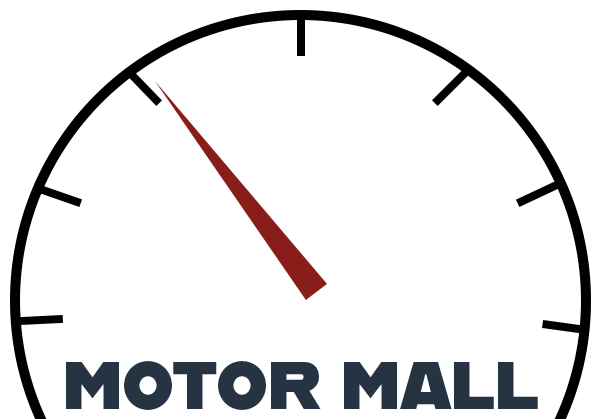
<style>
.page{position:relative;width:600px;height:419px;background:#ffffff}
.page>*{position:absolute;margin:0}
.t1{font:66.5px "Alfarn";color:#253343}
</style>
<div class="page">
<p class="t1" style="left:66px;top:361px;width:472px;height:49px">MOTOR MALL</p>
</div>
